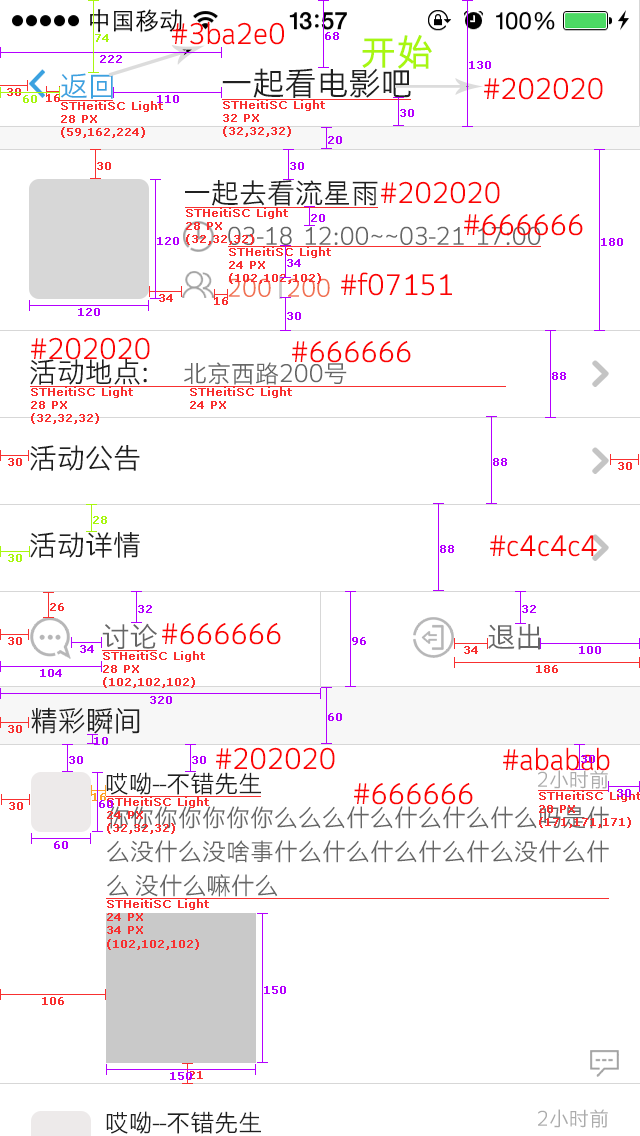
<style>
.page{position:relative;width:640px;height:1136px;background:#ffffff}
.page>*{position:absolute;margin:0}
.t1{font:28px "STHeitiSC-Light";color:#fb0404}
.t2{font:11px "Verdana";color:#a8f611;font-weight:bold}
.t3{font:11px "Verdana";color:#b400ff;font-weight:bold}
.t4{font:36px "STHeitiSC-Light";color:#a8f611;font-weight:bold}
.t5{font:28px "STHeitiSC-Light";color:#3ba2e0}
.t6{font:32px "STHeitiSC-Light";color:#202020}
.t7{font:11px "Verdana";color:#f83030;font-weight:bold}
.t8{font:28px "STHeitiSC-Light";color:#202020}
.t9{font:24px "STHeitiSC-Light";color:#666666}
.t10{font:24px "STHeitiSC-Light";color:#f07151}
.t11{font:22.9px "STHeitiSC-Light";color:#c9c9c9;scale:0.88 1}
.t12{font:28px "STHeitiSC-Light";color:#666666}
.t13{font:24px "STHeitiSC-Light";color:#202020}
.t14{font:20px "STHeitiSC-Light";color:#ababab}
.t15{font:11px "Verdana";color:#ffa128;font-weight:bold}
.t16{font:24px/34px "STHeitiSC-Light";color:#666666}
</style>
<div class="page">
<p class="t1" style="left:172px;top:21px;width:112px;height:24px">#3ba2e0</p>
<p class="t2" style="left:95px;top:34px;width:14px;height:8px">74</p>
<p class="t3" style="left:325px;top:32px;width:14px;height:8px">68</p>
<p class="t4" style="left:362px;top:35px;width:70px;height:34px">开始</p>
<p class="t3" style="left:100px;top:55px;width:22px;height:8px">222</p>
<p class="t3" style="left:469px;top:61px;width:22px;height:8px">130</p>
<p class="t5" style="left:60px;top:73px;width:53px;height:26px">返回</p>
<p class="t6" style="left:222px;top:68px;width:189px;height:30px">一起看电影吧</p>
<p class="t1" style="left:484px;top:77px;width:119px;height:23px">#202020</p>
<p class="t7" style="left:7px;top:88px;width:14px;height:8px">30</p>
<p class="t2" style="left:23px;top:95px;width:14px;height:8px">60</p>
<p class="t7" style="left:46px;top:94px;width:14px;height:8px">16</p>
<p class="t7" style="left:61px;top:101px;width:102px;height:37px">STHeitiSC Light<br>28 PX<br>(59,162,224)</p>
<p class="t3" style="left:157px;top:95px;width:22px;height:8px">110</p>
<p class="t7" style="left:223px;top:100px;width:102px;height:37px">STHeitiSC Light<br>32 PX<br>(32,32,32)</p>
<p class="t3" style="left:400px;top:109px;width:14px;height:8px">30</p>
<p class="t3" style="left:328px;top:136px;width:14px;height:8px">20</p>
<p class="t7" style="left:97px;top:162px;width:14px;height:8px">30</p>
<p class="t3" style="left:290px;top:162px;width:14px;height:8px">30</p>
<p class="t8" style="left:185px;top:180px;width:193px;height:26px">一起去看流星雨</p>
<p class="t1" style="left:381px;top:181px;width:119px;height:23px">#202020</p>
<p class="t7" style="left:186px;top:208px;width:102px;height:37px">STHeitiSC Light<br>28 PX<br>(32,32,32)</p>
<p class="t3" style="left:311px;top:214px;width:14px;height:8px">20</p>
<p class="t1" style="left:464px;top:214px;width:119px;height:22px">#666666</p>
<p class="t9" style="left:228px;top:226px;width:313px;height:19px">03-18  12:00~~03-21  17:00</p>
<p class="t3" style="left:157px;top:237px;width:22px;height:8px">120</p>
<p class="t3" style="left:601px;top:238px;width:22px;height:8px">180</p>
<p class="t7" style="left:229px;top:247px;width:102px;height:37px">STHeitiSC Light<br>24 PX<br>(102,102,102)</p>
<p class="t3" style="left:287px;top:259px;width:14px;height:8px">34</p>
<p class="t10" style="left:228px;top:278px;width:102px;height:19px">200   200</p>
<p class="t11" style="left:279px;top:275px;width:3px;height:24px">▏</p>
<p class="t1" style="left:341px;top:272px;width:111px;height:24px">#f07151</p>
<p class="t7" style="left:159px;top:294px;width:14px;height:8px">34</p>
<p class="t7" style="left:214px;top:297px;width:14px;height:8px">16</p>
<p class="t3" style="left:78px;top:308px;width:22px;height:8px">120</p>
<p class="t3" style="left:287px;top:312px;width:14px;height:8px">30</p>
<p class="t1" style="left:31px;top:337px;width:119px;height:23px">#202020</p>
<p class="t1" style="left:292px;top:341px;width:119px;height:22px">#666666</p>
<p class="t9" style="left:30px;top:359px;width:317px;height:26px"><span class="t8">活动地点:      </span>北京西路200号</p>
<p class="t3" style="left:552px;top:372px;width:14px;height:8px">88</p>
<p class="t7" style="left:31px;top:387px;width:102px;height:37px">STHeitiSC Light<br>28 PX<br>(32,32,32)</p>
<p class="t7" style="left:190px;top:387px;width:102px;height:22px">STHeitiSC Light<br>24 PX</p>
<p class="t8" style="left:30px;top:445px;width:110px;height:26px">活动公告</p>
<p class="t7" style="left:8px;top:458px;width:14px;height:8px">30</p>
<p class="t3" style="left:493px;top:458px;width:14px;height:8px">88</p>
<p class="t7" style="left:618px;top:462px;width:14px;height:8px">30</p>
<p class="t2" style="left:93px;top:516px;width:14px;height:8px">28</p>
<p class="t8" style="left:30px;top:532px;width:110px;height:26px">活动详情</p>
<p class="t3" style="left:440px;top:545px;width:14px;height:8px">88</p>
<p class="t1" style="left:490px;top:535px;width:107px;height:22px">#c4c4c4</p>
<p class="t2" style="left:8px;top:554px;width:14px;height:8px">30</p>
<p class="t7" style="left:50px;top:603px;width:14px;height:8px">26</p>
<p class="t3" style="left:138px;top:605px;width:14px;height:8px">32</p>
<p class="t3" style="left:522px;top:605px;width:14px;height:8px">32</p>
<p class="t12" style="left:102px;top:623px;width:55px;height:26px">讨论</p>
<p class="t1" style="left:162px;top:623px;width:119px;height:22px">#666666</p>
<p class="t12" style="left:488px;top:624px;width:52px;height:26px">退出</p>
<p class="t7" style="left:8px;top:637px;width:14px;height:8px">30</p>
<p class="t3" style="left:352px;top:637px;width:14px;height:8px">96</p>
<p class="t3" style="left:80px;top:645px;width:14px;height:8px">34</p>
<p class="t7" style="left:103px;top:651px;width:102px;height:37px">STHeitiSC Light<br>28 PX<br>(102,102,102)</p>
<p class="t7" style="left:464px;top:646px;width:14px;height:8px">34</p>
<p class="t3" style="left:579px;top:646px;width:22px;height:8px">100</p>
<p class="t7" style="left:536px;top:665px;width:22px;height:8px">186</p>
<p class="t3" style="left:40px;top:669px;width:22px;height:8px">104</p>
<p class="t3" style="left:150px;top:696px;width:22px;height:8px">320</p>
<p class="t8" style="left:31px;top:707px;width:109px;height:27px">精彩瞬间</p>
<p class="t3" style="left:328px;top:713px;width:14px;height:8px">60</p>
<p class="t7" style="left:8px;top:725px;width:14px;height:8px">30</p>
<p class="t3" style="left:94px;top:737px;width:14px;height:8px">10</p>
<p class="t1" style="left:216px;top:747px;width:119px;height:23px">#202020</p>
<p class="t1" style="left:503px;top:747px;width:107px;height:24px">#ababab</p>
<p class="t3" style="left:69px;top:756px;width:14px;height:8px">30</p>
<p class="t3" style="left:192px;top:756px;width:14px;height:8px">30</p>
<p class="t3" style="left:581px;top:755px;width:14px;height:8px">30</p>
<p class="t13" style="left:106px;top:772px;width:155px;height:23px">哎呦--不错先生</p>
<p class="t14" style="left:538px;top:770px;width:70px;height:19px">2小时前</p>
<p class="t1" style="left:354px;top:783px;width:119px;height:22px">#666666</p>
<p class="t15" style="left:92px;top:793px;width:14px;height:8px">16</p>
<p class="t7" style="left:107px;top:797px;width:102px;height:37px">STHeitiSC Light<br>24 PX<br>(32,32,32)</p>
<p class="t7" style="left:539px;top:791px;width:102px;height:37px">STHeitiSC Light<br>20 PX<br>(171,171,171)</p>
<p class="t3" style="left:617px;top:789px;width:14px;height:8px">30</p>
<p class="t7" style="left:9px;top:802px;width:14px;height:8px">30</p>
<p class="t3" style="left:99px;top:800px;width:14px;height:8px">60</p>
<p class="t16" style="left:106px;top:806px;width:503px;height:91px">你你你你你你你么么么什么什么什么什么吗是什么没什么没啥事什么什么什么什么什么没什么什么 没什么嘛什么</p>
<p class="t3" style="left:54px;top:841px;width:14px;height:8px">60</p>
<p class="t7" style="left:107px;top:899px;width:102px;height:51px">STHeitiSC Light<br>24 PX<br>34 PX<br>(102,102,102)</p>
<p class="t3" style="left:264px;top:986px;width:22px;height:8px">150</p>
<p class="t7" style="left:42px;top:997px;width:22px;height:8px">106</p>
<p class="t3" style="left:170px;top:1072px;width:22px;height:8px">150</p>
<p class="t7" style="left:189px;top:1071px;width:14px;height:8px">21</p>
<p class="t14" style="left:538px;top:1109px;width:70px;height:19px">2小时前</p>
<p class="t13" style="left:106px;top:1111px;width:155px;height:23px">哎呦--不错先生</p>
</div>
